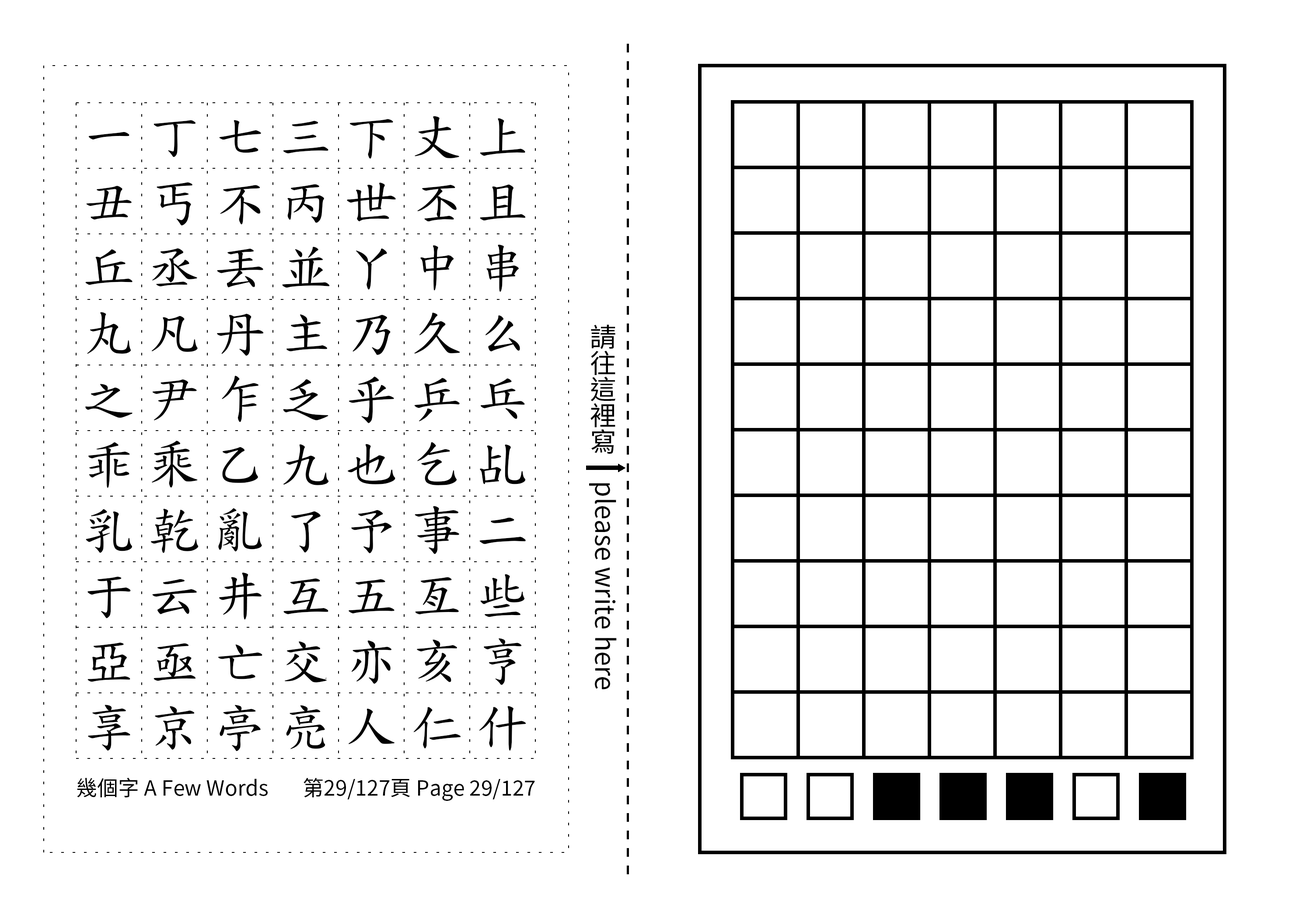
<style>
.page{position:relative;width:1299px;height:918px;background:#ffffff}
.page>*{position:absolute;margin:0}
.t1{font:52.5px/65.6px "TW-Kai-98_1";letter-spacing:0.25em;color:#000000}
.t2{font:26.2px "SourceHanSansTC-Regular";color:#000000}
.t3{font:21px "SourceHanSansTC-Regular";color:#000000}
</style>
<div class="page">
<p class="t1" style="left:85px;top:116px;width:441px;height:636px;text-align:center">一丁七三下丈上丑丐不丙世丕且丘丞丟並丫中串丸凡丹主乃久么之尹乍乏乎乒乓乖乘乙九也乞乩乳乾亂了予事二于云井互五亙些亞亟亡交亦亥亨享京亭亮人仁什</p>
<p class="t2" style="left:589px;top:324px;width:28px;height:366px;text-align:center">請往這裡寫　please write here</p>
<p class="t3" style="left:77px;top:778px;width:191px;height:20px">幾個字 A Few Words</p>
<p class="t3" style="left:303px;top:778px;width:232px;height:23px">第29/127頁 Page 29/127</p>
</div>
